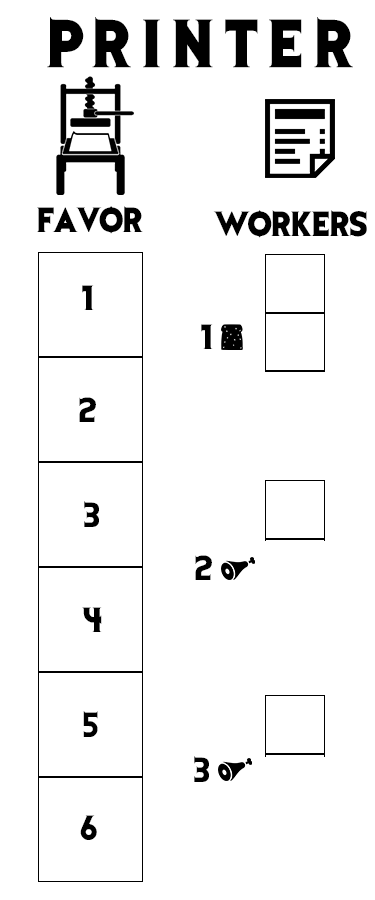
<style>
.page{position:relative;width:375px;height:900px;background:#ffffff}
.page>*{position:absolute;margin:0}
.t1{font:56.2px "EvilDead";letter-spacing:0.2em;color:#000000}
.t2{font:29.2px "EvilDead";color:#000000}
</style>
<div class="page">
<p class="t1" style="left:47px;top:17px;width:306px;height:51px">PRINTER</p>
<p class="t2" style="left:37px;top:206px;width:106px;height:28px">FAVOR</p>
<p class="t2" style="left:213px;top:210px;width:154px;height:28px">WORKERS</p>
<p class="t2" style="left:82px;top:285px;width:12px;height:25px">1</p>
<p class="t2" style="left:201px;top:324px;width:12px;height:25px">1</p>
<p class="t2" style="left:79px;top:397px;width:17px;height:25px">2</p>
<p class="t2" style="left:84px;top:501px;width:15px;height:26px">3</p>
<p class="t2" style="left:195px;top:555px;width:17px;height:25px">2</p>
<p class="t2" style="left:82px;top:607px;width:20px;height:25px">4</p>
<p class="t2" style="left:83px;top:711px;width:15px;height:26px">5</p>
<p class="t2" style="left:194px;top:756px;width:15px;height:26px">3</p>
<p class="t2" style="left:80px;top:815px;width:17px;height:25px">6</p>
</div>
